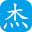
<style>
.page{position:relative;width:32px;height:32px;background:#00a0e9}
.page>*{position:absolute;margin:0}
.t1{font:30px "KaiTi";color:#fefefe}
</style>
<div class="page">
<p class="t1" style="left:3px;top:3px;width:26px;height:26px">杰</p>
</div>
